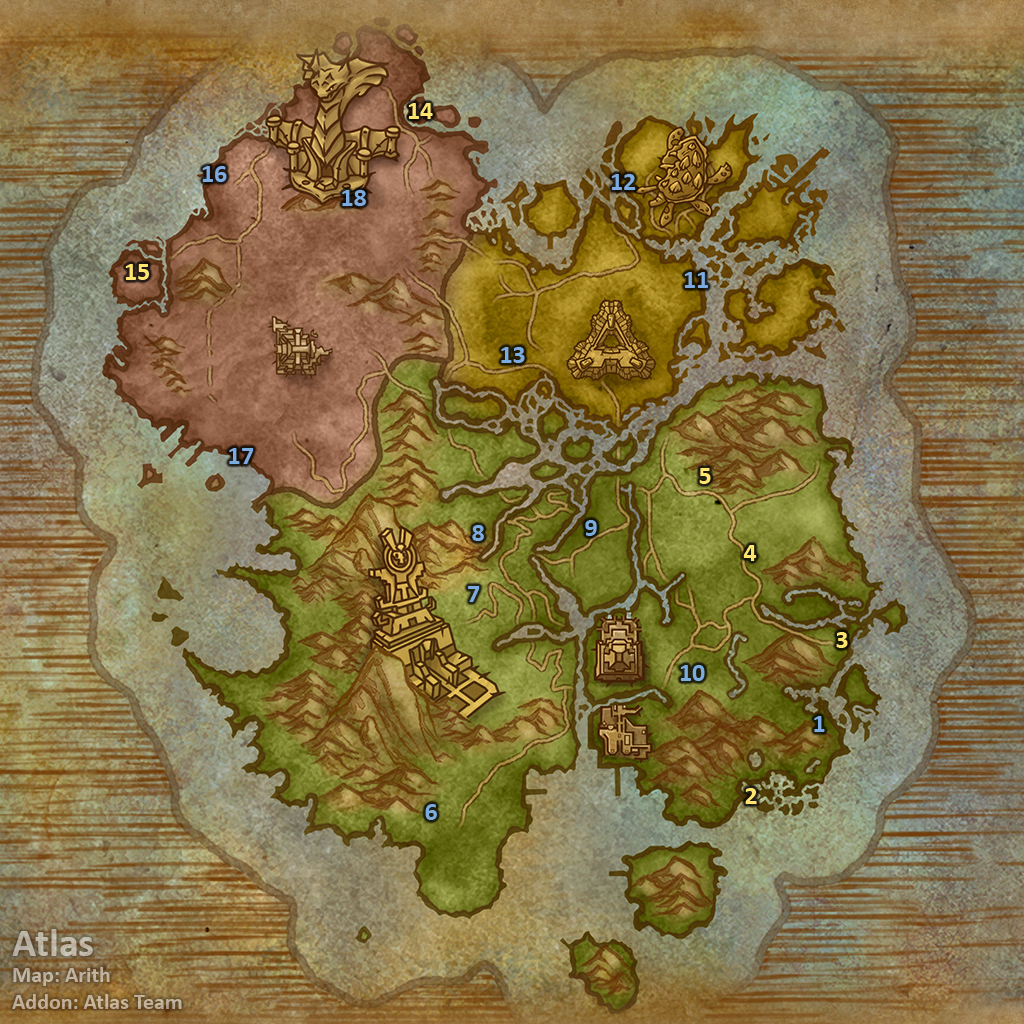
<style>
.page{position:relative;width:1024px;height:1024px}
.page>*{position:absolute;margin:0}
.t1{font:26px "Calibri-Bold";color:#fee570}
.t2{font:26px "Calibri-Bold";color:#7babe0}
.t3{font:22px "Calibri-Bold";color:#c0b2a0}
.t4{font:40px "Calibri-Bold";color:#c0b2a0}
</style>
<div class="page">
<p class="t1" style="left:408px;top:103px;width:25px;height:16px">14</p>
<p class="t2" style="left:202px;top:166px;width:25px;height:16px">16</p>
<p class="t2" style="left:611px;top:174px;width:25px;height:16px">12</p>
<p class="t2" style="left:342px;top:190px;width:24px;height:16px">18</p>
<p class="t1" style="left:125px;top:264px;width:24px;height:16px">15</p>
<p class="t2" style="left:684px;top:272px;width:24px;height:16px">11</p>
<p class="t2" style="left:501px;top:347px;width:24px;height:16px">13</p>
<p class="t2" style="left:229px;top:448px;width:25px;height:16px">17</p>
<p class="t1" style="left:699px;top:468px;width:12px;height:16px">5</p>
<p class="t2" style="left:585px;top:520px;width:12px;height:16px">9</p>
<p class="t2" style="left:472px;top:525px;width:12px;height:16px">8</p>
<p class="t1" style="left:743px;top:545px;width:14px;height:16px">4</p>
<p class="t2" style="left:468px;top:586px;width:12px;height:16px">7</p>
<p class="t1" style="left:836px;top:632px;width:12px;height:16px">3</p>
<p class="t2" style="left:680px;top:665px;width:25px;height:16px">10</p>
<p class="t2" style="left:814px;top:716px;width:11px;height:16px">1</p>
<p class="t1" style="left:745px;top:788px;width:12px;height:16px">2</p>
<p class="t2" style="left:425px;top:804px;width:12px;height:16px">6</p>
<p class="t3" style="left:12px;top:929px;width:170px;height:80px"><span class="t4">Atlas<br></span>Map: Arith<br>Addon: Atlas Team</p>
</div>
